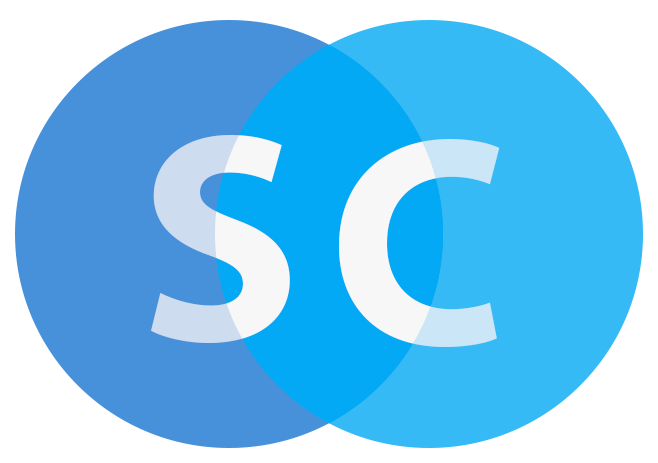
<style>
.page{position:relative;width:658px;height:463px;background:#ffffff}
.page>*{position:absolute;margin:0}
.t1{font:300px "MyriadPro-Bold"}
.t2{font:300px "MyriadPro-Bold";color:#f7f7f7}
</style>
<div class="page">
<p class="t1" style="left:151px;top:135px;width:139px;height:208px">S</p>
<p class="t1" style="left:151px;top:135px;width:139px;height:208px">S</p>
<p class="t2" style="left:339px;top:139px;width:161px;height:208px;opacity:0.7">C</p>
<p class="t2" style="left:339px;top:139px;width:161px;height:208px">C</p>
</div>
